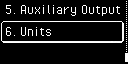
<style>
.page{position:relative;width:128px;height:64px;background:#000000}
.page>*{position:absolute;margin:0}
.t1{font:16px "PixelOperator";color:#ffffff}
</style>
<div class="page">
<p class="t1" style="left:6px;top:5px;width:10px;height:9px">5.</p>
<p class="t1" style="left:20px;top:5px;width:100px;height:11px">Auxiliary Output</p>
<p class="t1" style="left:6px;top:27px;width:10px;height:9px">6.</p>
<p class="t1" style="left:20px;top:27px;width:31px;height:9px">Units</p>
</div>
